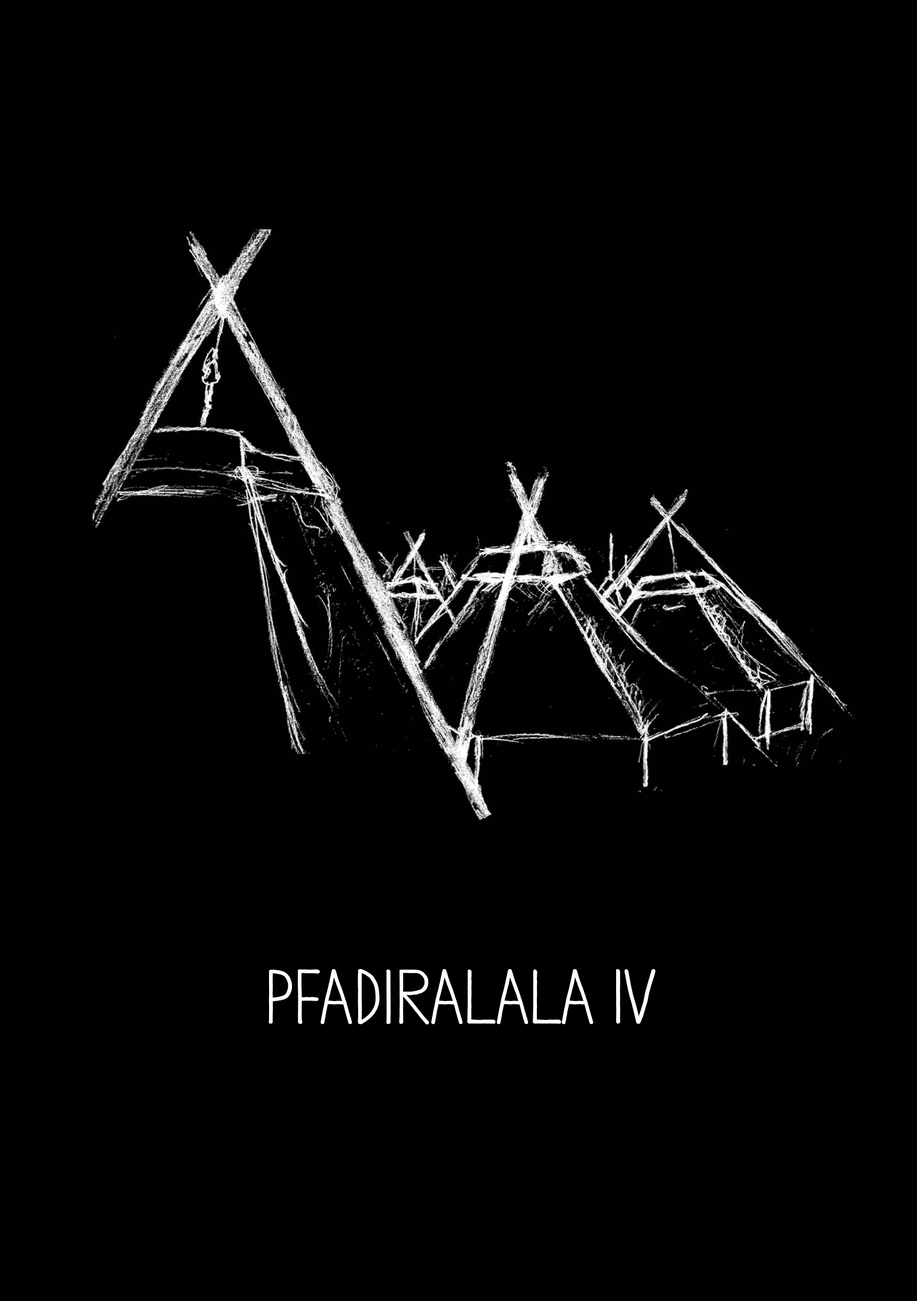
<style>
.page{position:relative;width:917px;height:1301px;background:#010101}
.page>*{position:absolute;margin:0}
.t1{font:74.3px "Hannah-Regular";color:#ffffff;font-weight:bold}
</style>
<div class="page">
<p class="t1" style="left:268px;top:968px;width:388px;height:56px">Pfadiralala IV</p>
</div>
